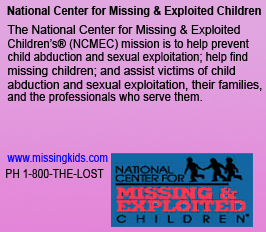
<style>
.page{position:relative;width:266px;height:232px}
.page>*{position:absolute;margin:0}
.t1{font:12px "Arial-BoldMT";color:#000000;scale:0.92 1}
.t2{font:12px "ArialMT";color:#000000}
.t3{font:12px "ArialMT";color:#000000;scale:0.94 1}
.t4{font:12px "ArialMT";color:#000000;scale:0.93 1}
.t5{font:12px "ArialMT";color:#000000;scale:0.95 1}
.t6{font:12px "ArialMT";color:#0b0bf9;scale:0.86 1}
.t7{font:12px "ArialMT";color:#000000;scale:0.86 1}
</style>
<div class="page">
<p class="t1" style="left:7px;top:6px;width:254px;height:11px">National Center for Missing &amp; Exploited Children</p>
<p class="t2" style="left:7px;top:25px;width:233px;height:11px">The National Center for Missing &amp; Exploited</p>
<p class="t3" style="left:8px;top:39px;width:241px;height:11px">Children’s® (NCMEC) mission is to help prevent</p>
<p class="t4" style="left:8px;top:52px;width:240px;height:11px">child abduction and sexual exploitation; help find</p>
<p class="t2" style="left:8px;top:66px;width:227px;height:11px">missing children; and assist victims of child</p>
<p class="t2" style="left:7px;top:80px;width:255px;height:11px">abduction and sexual exploitation, their families,</p>
<p class="t5" style="left:7px;top:92px;width:195px;height:11px">and the professionals who serve them.</p>
<p class="t6" style="left:7px;top:153px;width:101px;height:11px">www.missingkids.com</p>
<p class="t7" style="left:6px;top:169px;width:98px;height:9px">PH 1-800-THE-LOST</p>
</div>
